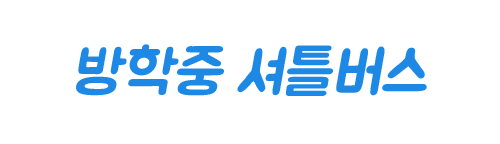
<style>
.page{position:relative;width:500px;height:144px;background:#ffffff}
.page>*{position:absolute;margin:0}
.t1{font:60px "BMJUA";color:#1e88e5;font-style:italic}
</style>
<div class="page">
<p class="t1" style="left:76px;top:44px;width:351px;height:52px">방학중 셔틀버스</p>
</div>
